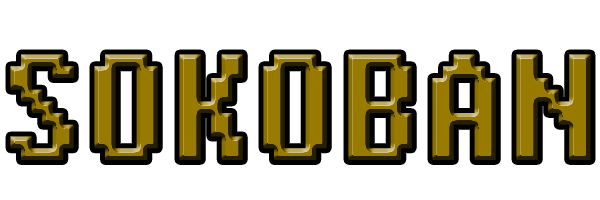
<style>
.page{position:relative;width:600px;height:200px;background:#ffffff}
.page>*{position:absolute;margin:0}
.t1{font:150px "Fixedsys";color:#997a00;scale:0.9 1}
</style>
<div class="page">
<p class="t1" style="left:10px;top:54px;width:581px;height:106px">SOKOBAN</p>
</div>
